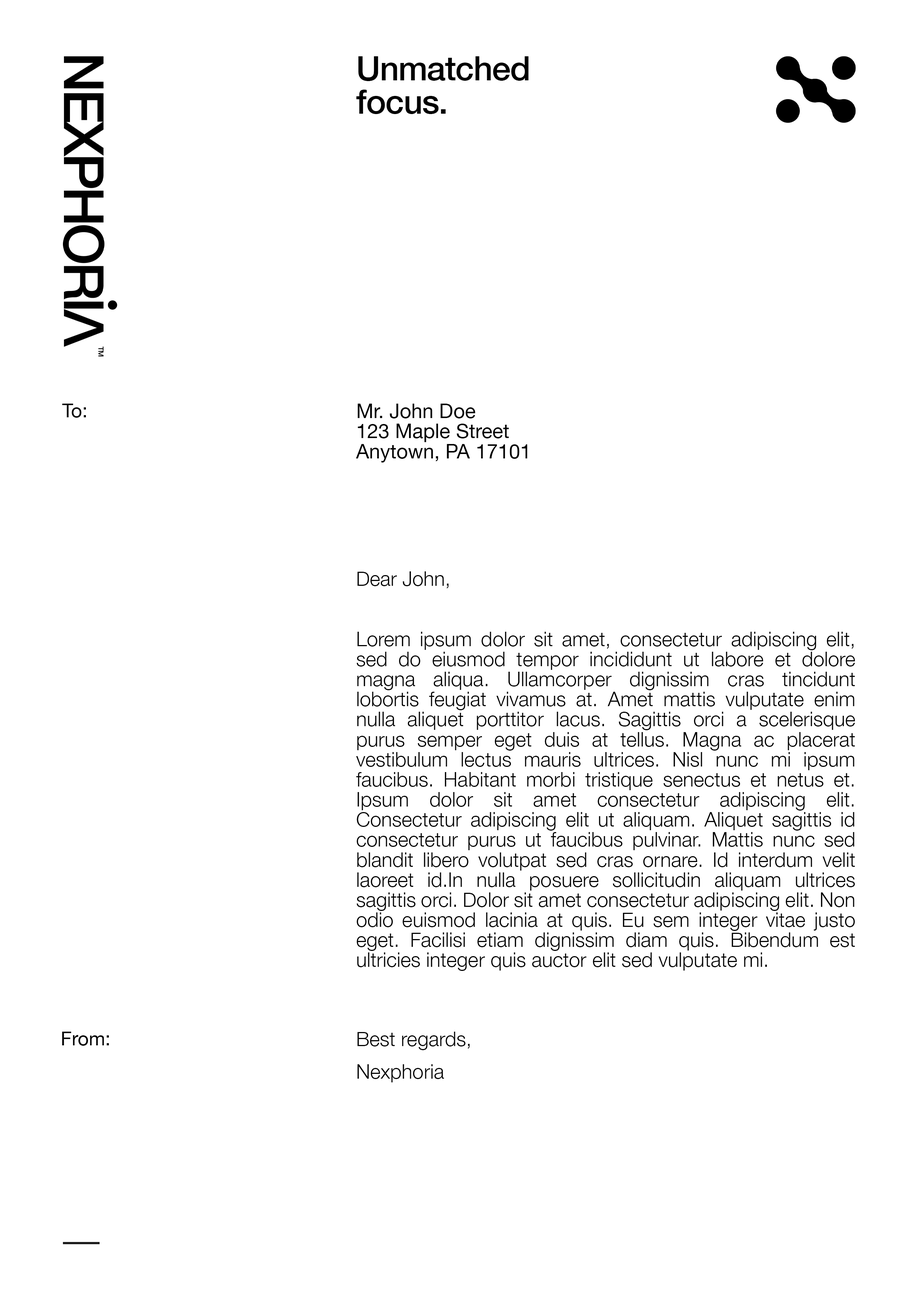
<style>
.page{position:relative;width:918px;height:1299px;background:#ffffff}
.page>*{position:absolute;margin:0}
.t1{font:33.6px/33.6px "HelveticaNeue-Medium";letter-spacing:-0.019em;color:#000000}
.t2{font:19.1px "HelveticaNeue";color:#000000}
.t3{font:20.1px/20.1px "HelveticaNeue";color:#000000}
.t4{font:20.1px/20.1px "HelveticaNeue-Light";color:#000000}
.t5{font:20.1px/16.4px "HelveticaNeue-Light";color:#000000}
</style>
<div class="page">
<p class="t1" style="left:356px;top:56px;width:173px;height:58px">Unmatched <br>focus.</p>
<p class="t2" style="left:62px;top:404px;width:24px;height:14px">To:</p>
<p class="t3" style="left:356px;top:404px;width:172px;height:58px">Mr. John Doe <br>123 Maple Street <br>Anytown, PA 17101</p>
<p class="t4" style="left:356px;top:571px;width:499px;height:400px;text-align:justify">Dear John, <br><br><br>Lorem ipsum dolor sit amet, consectetur adipiscing elit, sed do eiusmod tempor incididunt ut labore et dolore magna aliqua. Ullamcorper dignissim cras tincidunt lobortis feugiat vivamus at. Amet mattis vulputate enim nulla aliquet porttitor lacus. Sagittis orci a scelerisque purus semper eget duis at tellus. Magna ac placerat vestibulum lectus mauris ultrices. Nisl nunc mi ipsum faucibus. Habitant morbi tristique senectus et netus et. Ipsum dolor sit amet consectetur adipiscing elit. Consectetur adipiscing elit ut aliquam. Aliquet sagittis id consectetur purus ut faucibus pulvinar. Mattis nunc sed blandit libero volutpat sed cras ornare. Id interdum velit laoreet id.In nulla posuere sollicitudin aliquam ultrices sagittis orci. Dolor sit amet consectetur adipiscing elit. Non odio euismod lacinia at quis. Eu sem integer vitae justo eget. Facilisi etiam dignissim diam quis. Bibendum est ultricies integer quis auctor elit sed vulputate mi.</p>
<p class="t2" style="left:62px;top:1031px;width:47px;height:15px">From:</p>
<p class="t5" style="left:357px;top:1031px;width:113px;height:51px">Best regards, <br><br>Nexphoria</p>
</div>
